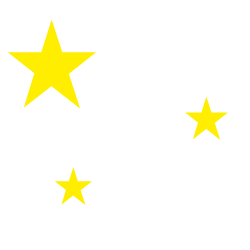
<style>
.page{position:relative;width:250px;height:250px;background:#ffffff}
.page>*{position:absolute;margin:0}
.t1{font:109.3px "MalgunGothic";letter-spacing:0.141em;color:#ffee00;scale:0.95 1}
.t2{font:52.4px "MalgunGothic";letter-spacing:0.141em;color:#ffee00;scale:0.95 1}
.t3{font:45.8px "MalgunGothic";letter-spacing:0.141em;color:#ffee00;scale:0.95 1}
</style>
<div class="page">
<p class="t1" style="left:8px;top:20px;width:88px;height:89px">★</p>
<p class="t2" style="left:185px;top:97px;width:43px;height:43px">★</p>
<p class="t3" style="left:55px;top:167px;width:37px;height:38px">★</p>
</div>
